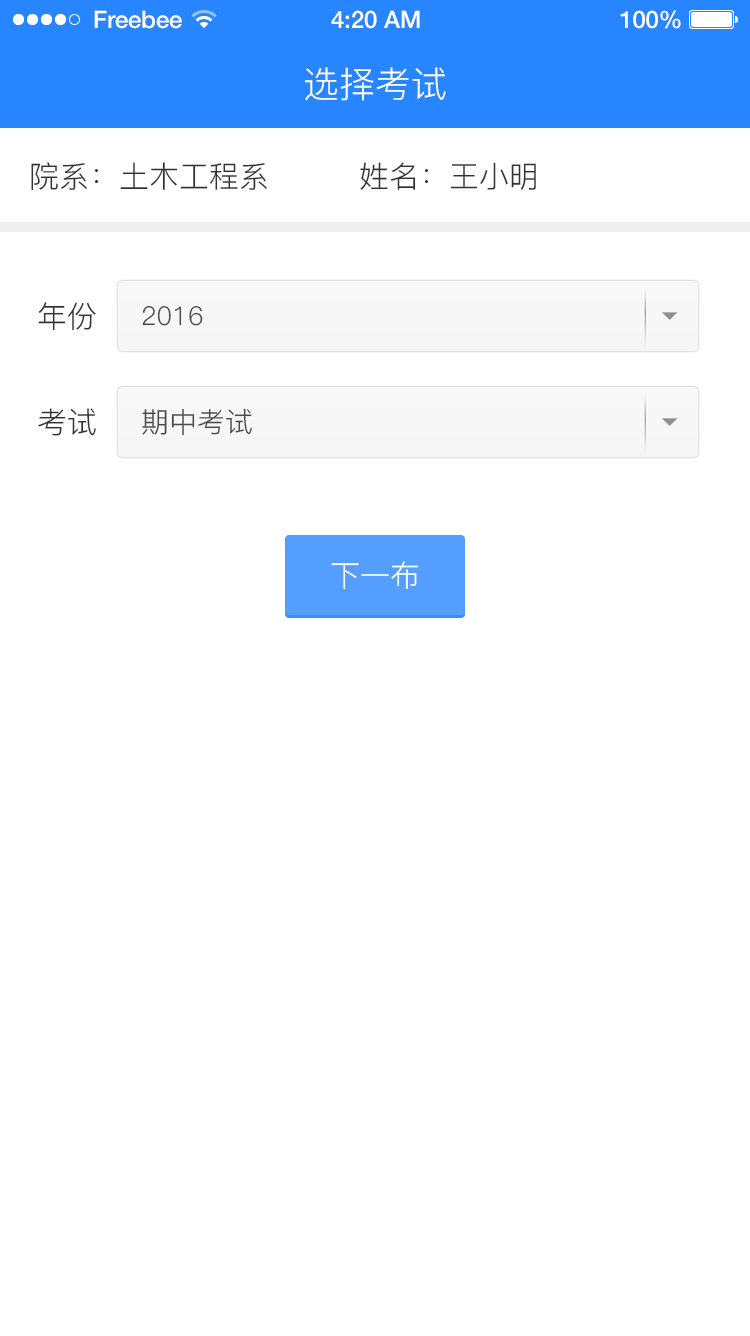
<style>
.page{position:relative;width:750px;height:1336px;background:#ffffff}
.page>*{position:absolute;margin:0}
.t1{font:24px "HelveticaNeue-Medium";color:#ffffff}
.t2{font:36px "PingFang-SC-Regular";color:#ffffff}
.t3{font:30px "PingFang-SC-Regular";color:#333333}
.t4{font:26px "PingFang-SC-Regular";color:#4a4949}
.t5{font:28px "PingFang-SC-Regular";color:#4a4949}
.t6{font:30px "PingFang-SC-Regular";color:#ffffff}
</style>
<div class="page">
<p class="t1" style="left:94px;top:10px;width:88px;height:19px">Freebee</p>
<p class="t1" style="left:331px;top:10px;width:89px;height:19px">4:20 AM</p>
<p class="t1" style="left:620px;top:10px;width:61px;height:19px">100%</p>
<p class="t2" style="left:305px;top:67px;width:141px;height:34px">选择考试</p>
<p class="t3" style="left:31px;top:162px;width:505px;height:29px">院系：土木工程系         姓名：王小明</p>
<p class="t3" style="left:38px;top:302px;width:58px;height:29px">年份</p>
<p class="t4" style="left:142px;top:305px;width:61px;height:21px">2016</p>
<p class="t3" style="left:38px;top:408px;width:58px;height:28px">考试</p>
<p class="t5" style="left:142px;top:408px;width:110px;height:27px">期中考试</p>
<p class="t6" style="left:331px;top:561px;width:88px;height:29px">下一布</p>
</div>
